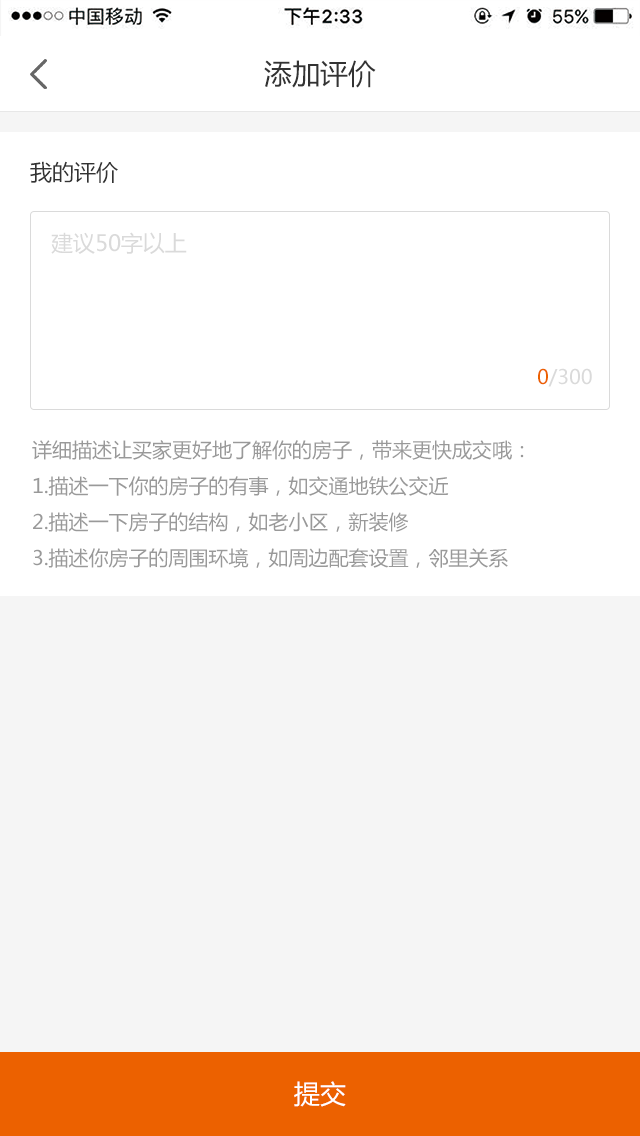
<style>
.page{position:relative;width:640px;height:1136px;background:#ffffff}
.page>*{position:absolute;margin:0}
.t1{font:28px "MicrosoftYaHei";color:#333333}
.t2{font:22px "MicrosoftYaHei";color:#333333}
.t3{font:22px "MicrosoftYaHei";color:#dadada}
.t4{font:20px "MicrosoftYaHei";color:#dadada}
.t5{font:20px "MicrosoftYaHei";color:#ec6100}
.t6{font:20px/36px "MicrosoftYaHei";color:#999999}
.t7{font:26px "MicrosoftYaHei";color:#ffffff}
</style>
<div class="page">
<p class="t1" style="left:264px;top:60px;width:112px;height:28px">添加评价</p>
<p class="t2" style="left:30px;top:161px;width:88px;height:23px">我的评价</p>
<p class="t3" style="left:51px;top:232px;width:136px;height:22px">建议50字以上</p>
<p class="t4" style="left:538px;top:368px;width:54px;height:19px"><span class="t5">0</span>/300</p>
<p class="t6" style="left:32px;top:440px;width:492px;height:128px">详细描述让买家更好地了解你的房子，带来更快成交哦：<br>1.描述一下你的房子的有事，如交通地铁公交近<br>2.描述一下房子的结构，如老小区，新装修<br>3.描述你房子的周围环境，如周边配套设置，邻里关系</p>
<p class="t7" style="left:294px;top:1081px;width:52px;height:26px">提交</p>
</div>
